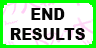
<style>
.page{position:relative;width:96px;height:48px;background:#ffffff}
.page>*{position:absolute;margin:0}
.t1{font:16.2px "Arial-Black";color:#050505;scale:0.91 1}
</style>
<div class="page">
<p class="t1" style="left:10px;top:8px;width:75px;height:32px;text-align:center">END <br>RESULTS</p>
</div>
